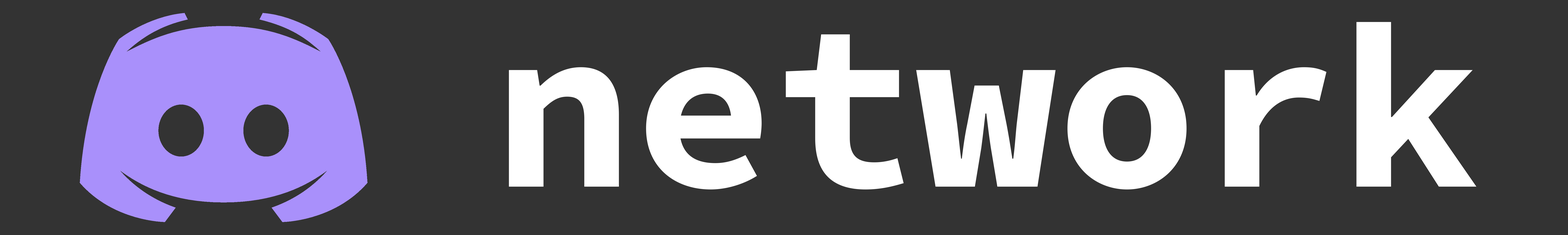
<style>
.page{position:relative;width:1568px;height:235px;background:#333333}
.page>*{position:absolute;margin:0}
.t1{font:235.2px "SourceCodePro-Bold";color:#ffffff}
</style>
<div class="page">
<p class="t1" style="left:509px;top:22px;width:967px;height:168px">network</p>
</div>
